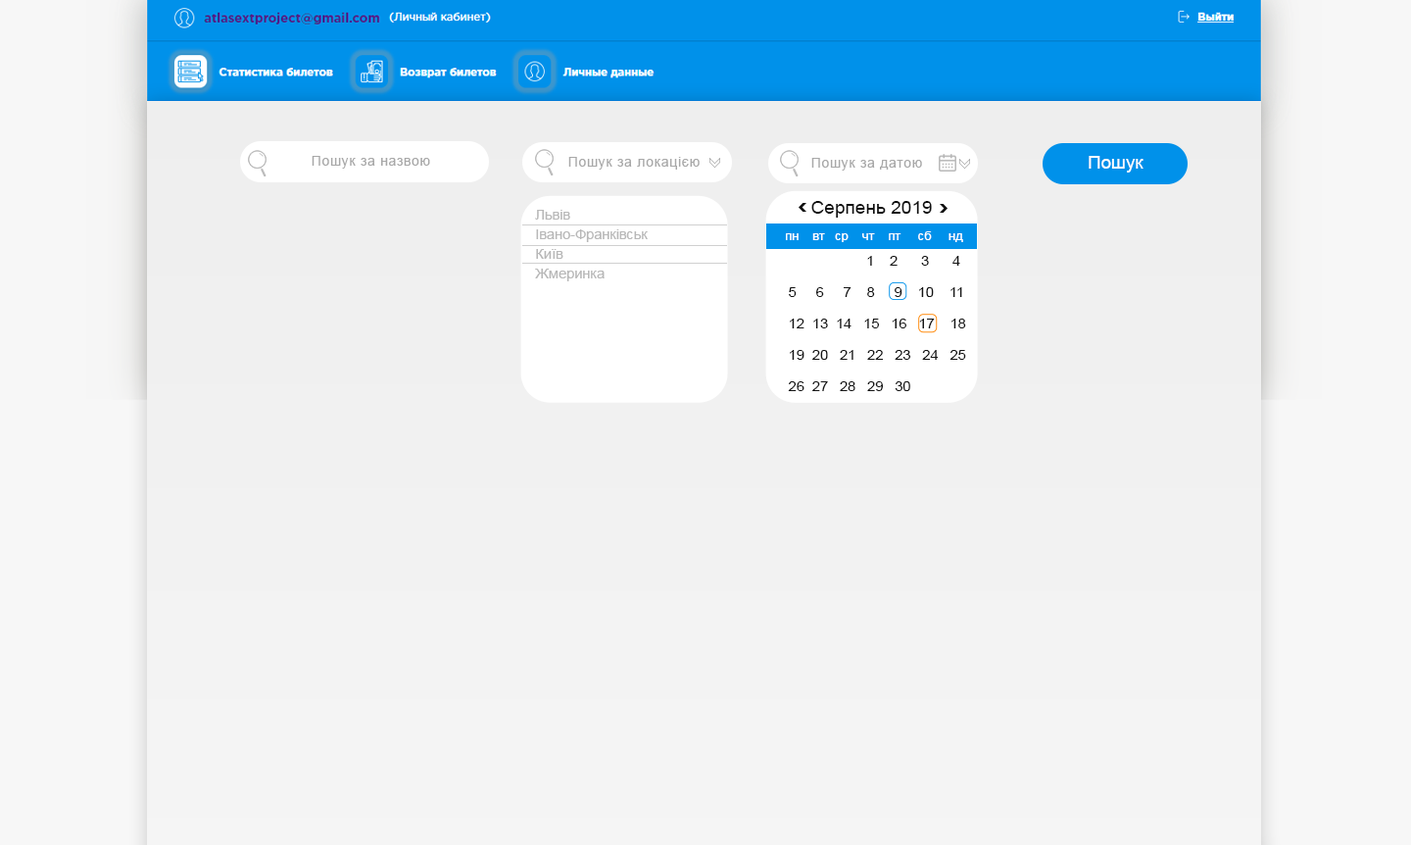
<style>
.page{position:relative;width:1411px;height:845px}
.page>*{position:absolute;margin:0}
.t1{font:13.7px "ArialMT";letter-spacing:0.05em;color:#a8a8a8}
.t2{font:17.6px "ArialMT";letter-spacing:-0.01em;color:#ffffff;scale:1.06 1}
.t3{font:13.7px/19.6px "ArialMT";letter-spacing:-0.01em;color:#b8b8b8;scale:1.06 1}
.t4{font:17.6px "ArialMT";color:#0f0f0f;scale:1.06 1}
.t5{font:11.8px "ArialMT";color:#ffffff;scale:1.06 1}
.t6{font:13.7px/31.4px "ArialMT";letter-spacing:-0.01em;color:#151515;scale:1.06 1}
</style>
<div class="page">
<p class="t1" style="left:312px;top:156px;width:118px;height:13px">Пошук за назвою</p>
<p class="t1" style="left:568px;top:157px;width:132px;height:13px">Пошук за локацією</p>
<p class="t1" style="left:812px;top:158px;width:110px;height:13px">Пошук за датою</p>
<p class="t2" style="left:1089px;top:156px;width:55px;height:17px">Пошук</p>
<p class="t3" style="left:535px;top:210px;width:113px;height:71px">Львів<br>Івано-Франківськ<br>Київ<br>Жмеринка</p>
<p class="t4" style="left:812px;top:201px;width:120px;height:17px">Серпень 2019</p>
<p class="t5" style="left:786px;top:231px;width:177px;height:11px">пн    вт   ср    чт    пт     сб     нд</p>
<p class="t6" style="left:788px;top:256px;width:178px;height:135px">1    2      3      4<br>5     6     7    8     9    10    11<br>12  13  14   15   16   17    18<br>19  20   21   22   23   24   25<br>26  27   28   29   30</p>
</div>
